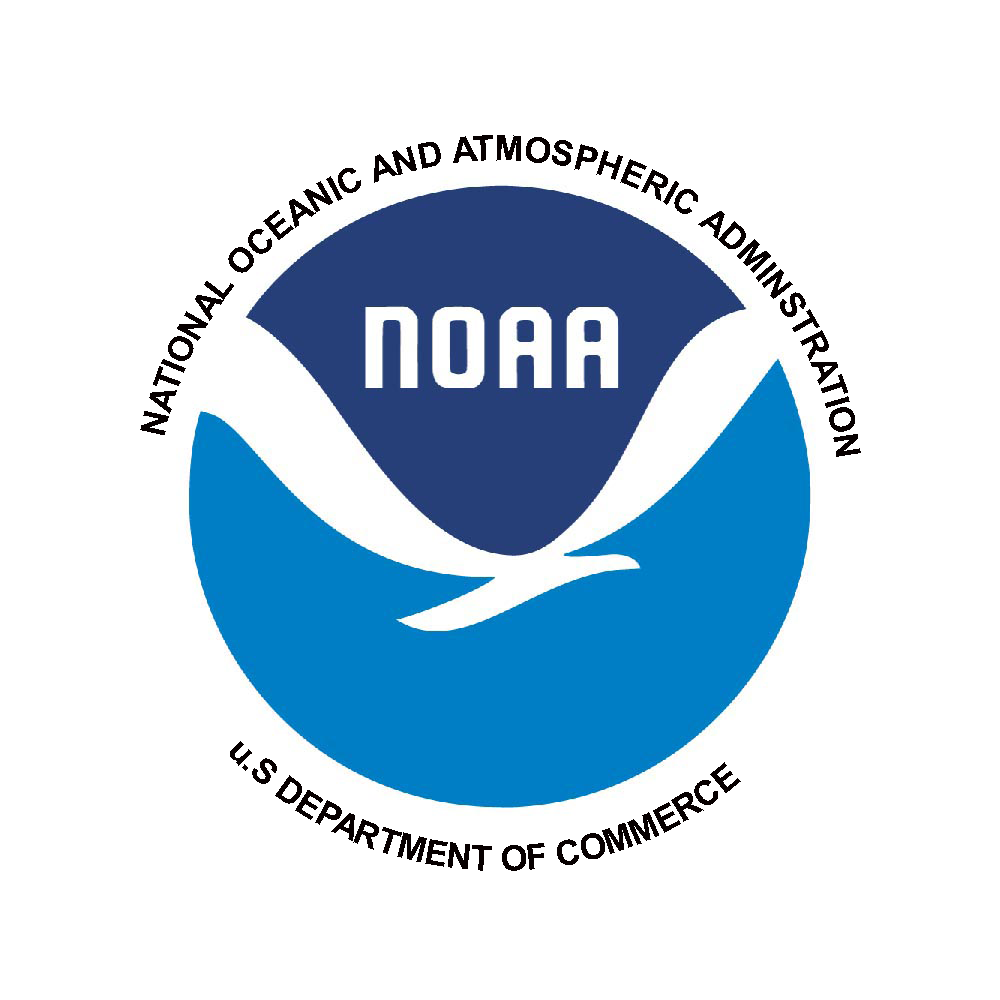
<style>
.page{position:relative;width:1000px;height:1000px;background:#ffffff}
.page>*{position:absolute;margin:0}
.t1{font:34.7px "Arial-BoldMT";color:#070000}
</style>
<div class="page">
<p class="t1" style="left:140px;top:135px;width:721px;height:322px">NATIONAL OCEANIC AND ATMOSPHERIC ADMINSTRATION</p>
<p class="t1" style="left:230px;top:741px;width:511px;height:130px">u.S DEPARTMENT OF COMMERCE</p>
</div>
